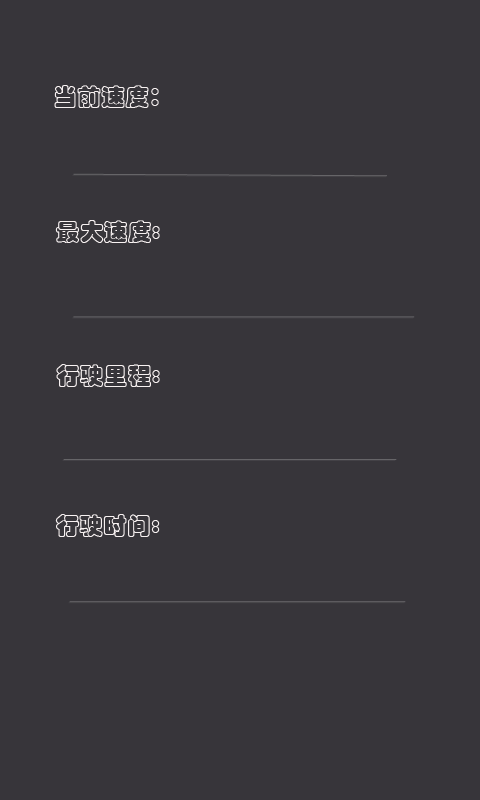
<style>
.page{position:relative;width:480px;height:800px;background:#37353a}
.page>*{position:absolute;margin:0}
.t1{font:24px "STCaiyun";color:#f7f1f1}
</style>
<div class="page">
<p class="t1" style="left:54px;top:85px;width:105px;height:23px">当前速度：</p>
<p class="t1" style="left:55px;top:220px;width:105px;height:23px">最大速度:</p>
<p class="t1" style="left:56px;top:364px;width:104px;height:23px">行驶里程:</p>
<p class="t1" style="left:55px;top:514px;width:105px;height:23px">行驶时间:</p>
</div>
